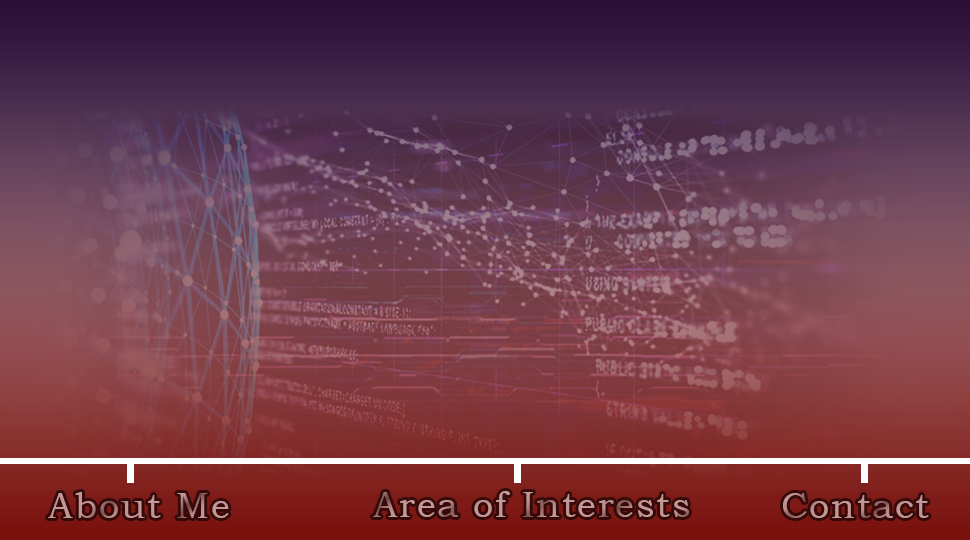
<style>
.page{position:relative;width:970px;height:540px}
.page>*{position:absolute;margin:0}
.t1{font:36px "BookmanOldStyle";letter-spacing:0.05em;color:#c29795}
.t2{font:36px "BookmanOldStyle";letter-spacing:0.05em;color:#c19695}
.t3{font:36px "BookmanOldStyle";letter-spacing:0.05em;color:#c09594}
</style>
<div class="page">
<p class="t1" style="left:48px;top:492px;width:181px;height:26px">About Me</p>
<p class="t2" style="left:373px;top:491px;width:316px;height:26px">Area of Interests</p>
<p class="t3" style="left:783px;top:493px;width:146px;height:25px">Contact</p>
</div>
